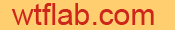
<style>
.page{position:relative;width:175px;height:30px;background:#ffce6e}
.page>*{position:absolute;margin:0}
.t1{font:30px "ArialMT";color:#c60f0f}
</style>
<div class="page">
<p class="t1" style="left:11px;top:3px;width:143px;height:22px;opacity:0.88">wtflab.com</p>
</div>
